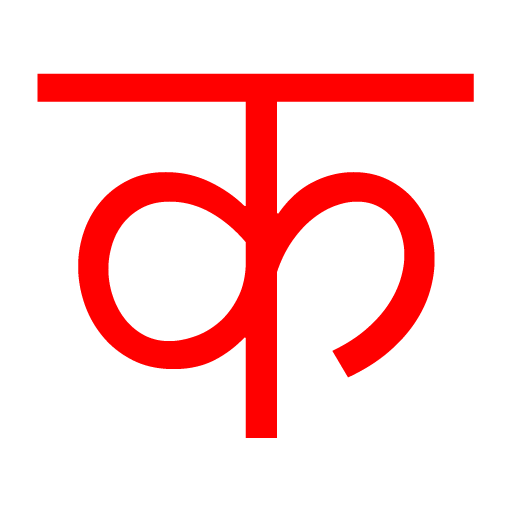
<style>
.page{position:relative;width:512px;height:512px;background:#ffffff}
.page>*{position:absolute;margin:0}
.t1{font:500px "NirmalaUI-Semilight";color:#ff0000}
</style>
<div class="page">
<p class="t1" style="left:37px;top:73px;width:437px;height:365px">क</p>
</div>
